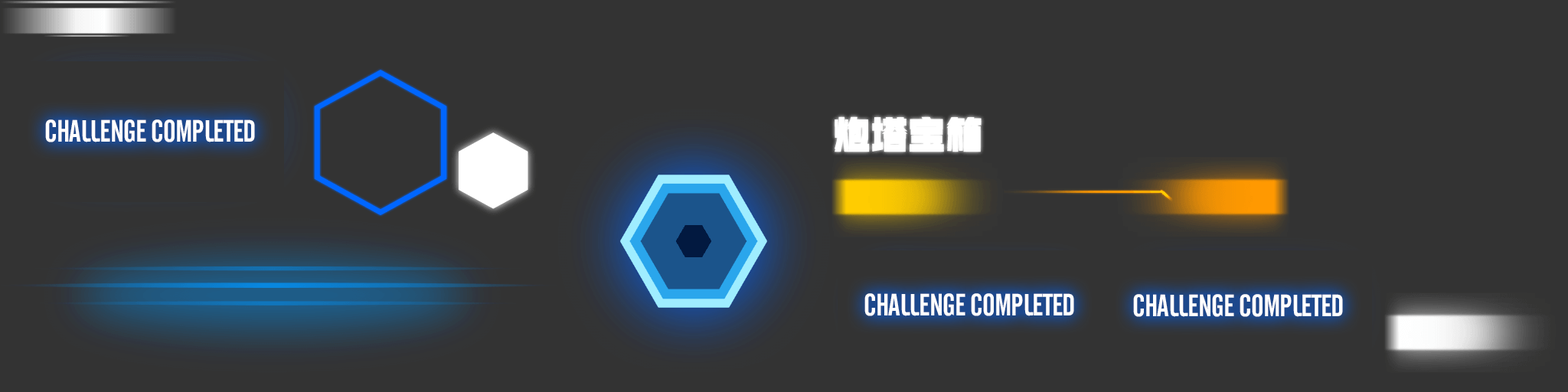
<style>
.page{position:relative;width:1568px;height:392px;background:#333333}
.page>*{position:absolute;margin:0}
.t1{font:30.6px "UTM-Cafeta";letter-spacing:-0.025em;color:#ffffff;text-transform:uppercase}
</style>
<div class="page">
<p class="t1" style="left:45px;top:119px;width:210px;height:23px">Challenge Completed</p>
<p class="t1" style="left:864px;top:293px;width:210px;height:23px">Challenge Completed</p>
<p class="t1" style="left:1133px;top:294px;width:210px;height:23px">Challenge Completed</p>
</div>
